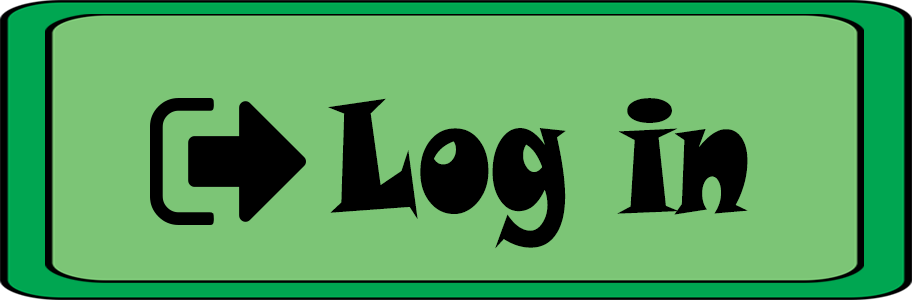
<style>
.page{position:relative;width:912px;height:300px;background:#7cc576}
.page>*{position:absolute;margin:0}
.t1{font:160px "SnapITC-Regular";color:#000000;scale:0.75 1}
</style>
<div class="page">
<p class="t1" style="left:328px;top:98px;width:420px;height:151px">Log in</p>
</div>
